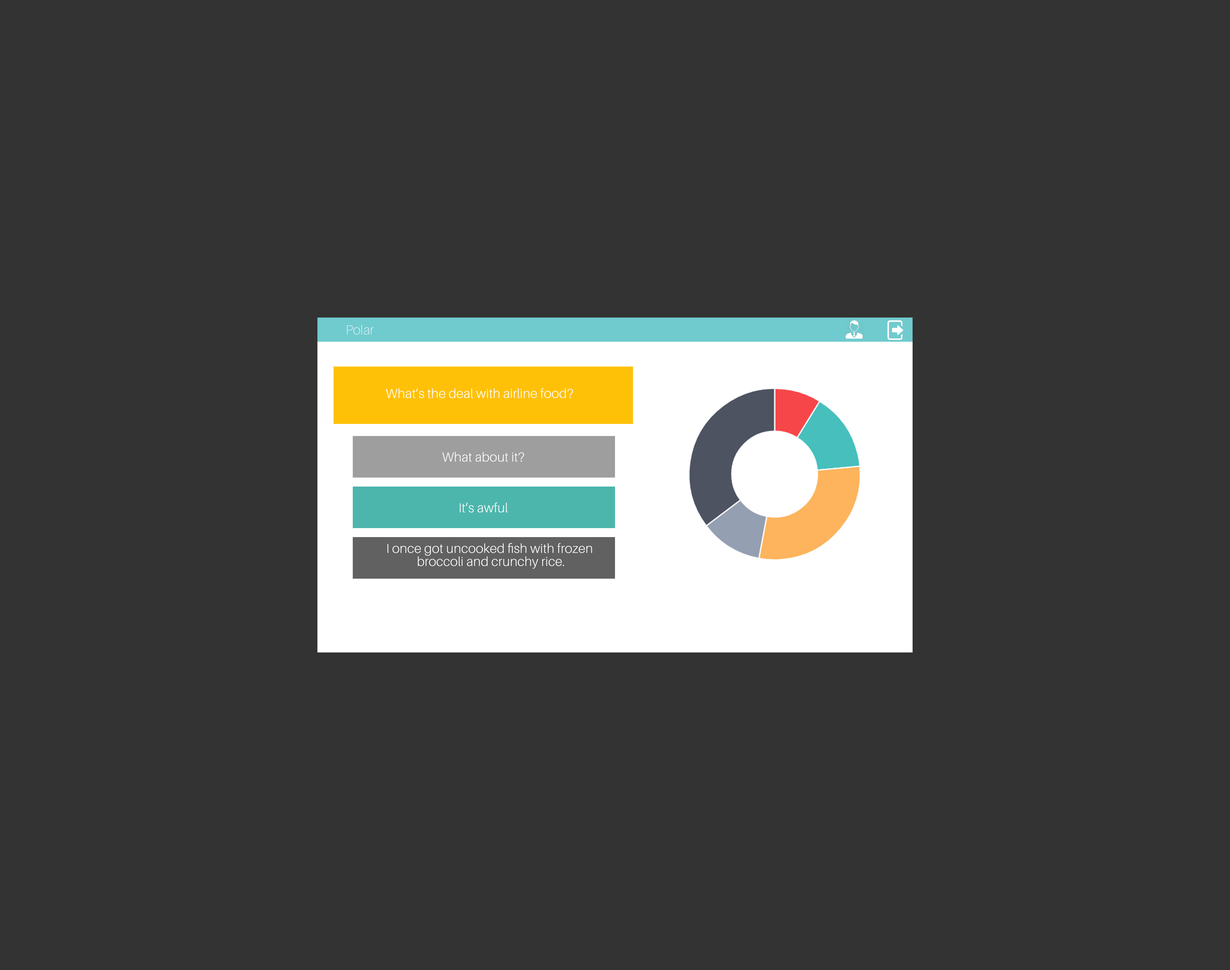
<style>
.page{position:relative;width:1230px;height:970px;background:#333333}
.page>*{position:absolute;margin:0}
.t1{font:13px "Aileron-Thin";letter-spacing:0.01em;color:#ffffff}
.t2{font:13px "Aileron-Light";letter-spacing:0.01em;color:#ffffff}
.t3{font:13px/4.3px "Aileron-Light";letter-spacing:0.01em;color:#ffffff}
</style>
<div class="page">
<p class="t1" style="left:347px;top:325px;width:26px;height:9px">Polar</p>
<p class="t2" style="left:386px;top:388px;width:187px;height:10px">What’s the deal with airline food?</p>
<p class="t2" style="left:442px;top:452px;width:82px;height:10px">What about it?</p>
<p class="t2" style="left:460px;top:502px;width:48px;height:10px">It’s awful</p>
<p class="t3" style="left:387px;top:543px;width:205px;height:25px;text-align:center">I once got uncooked fish with frozen <br><br><br>broccoli and crunchy rice.</p>
</div>
